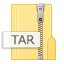
<style>
.page{position:relative;width:64px;height:64px;background:#ffffff}
.page>*{position:absolute;margin:0}
.t1{font:12px "MeiryoUI";color:#64635e}
</style>
<div class="page">
<p class="t1" style="left:11px;top:35px;width:24px;height:10px">TAR</p>
</div>
